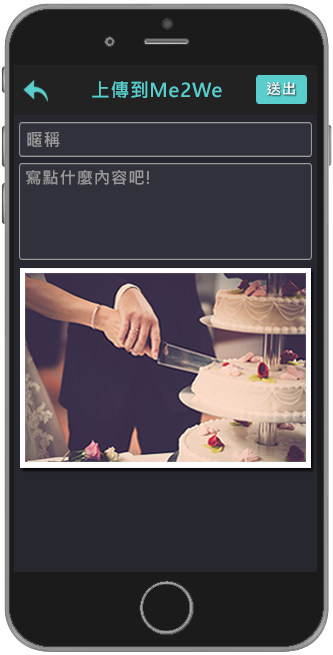
<style>
.page{position:relative;width:333px;height:655px}
.page>*{position:absolute;margin:0}
.t1{font:19.1px "MicrosoftJhengHeiUIBold";letter-spacing:0.04em;color:#5acdcd}
.t2{font:14.8px "MicrosoftJhengHeiUIBold";letter-spacing:0.04em;color:#ffffff}
.t3{font:17.5px "MicrosoftJhengHeiUIBold";letter-spacing:0.04em;color:#999999}
.t4{font:16.5px "MicrosoftJhengHeiUIBold";letter-spacing:0.04em;color:#999999}
</style>
<div class="page">
<p class="t1" style="left:92px;top:81px;width:130px;height:17px">上傳到Me2We</p>
<p class="t2" style="left:267px;top:82px;width:28px;height:13px">送出</p>
<p class="t3" style="left:27px;top:131px;width:33px;height:16px">暱稱</p>
<p class="t4" style="left:26px;top:170px;width:123px;height:15px">寫點什麼內容吧!</p>
</div>
